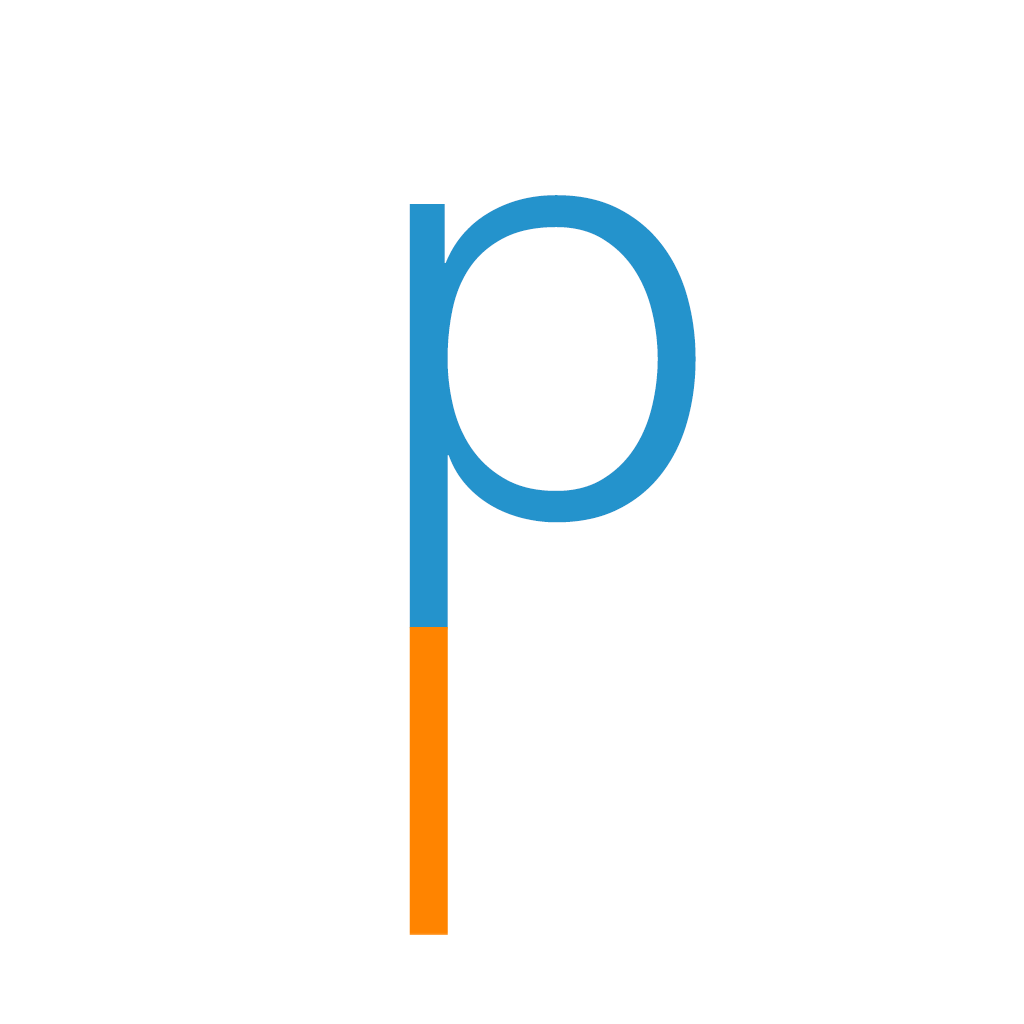
<style>
.page{position:relative;width:1024px;height:1024px;background:#ffffff}
.page>*{position:absolute;margin:0}
.t1{font:600px "HelveticaNeue-Light";color:#2493cc}
</style>
<div class="page">
<p class="t1" style="left:409px;top:195px;width:287px;height:433px">p</p>
</div>
